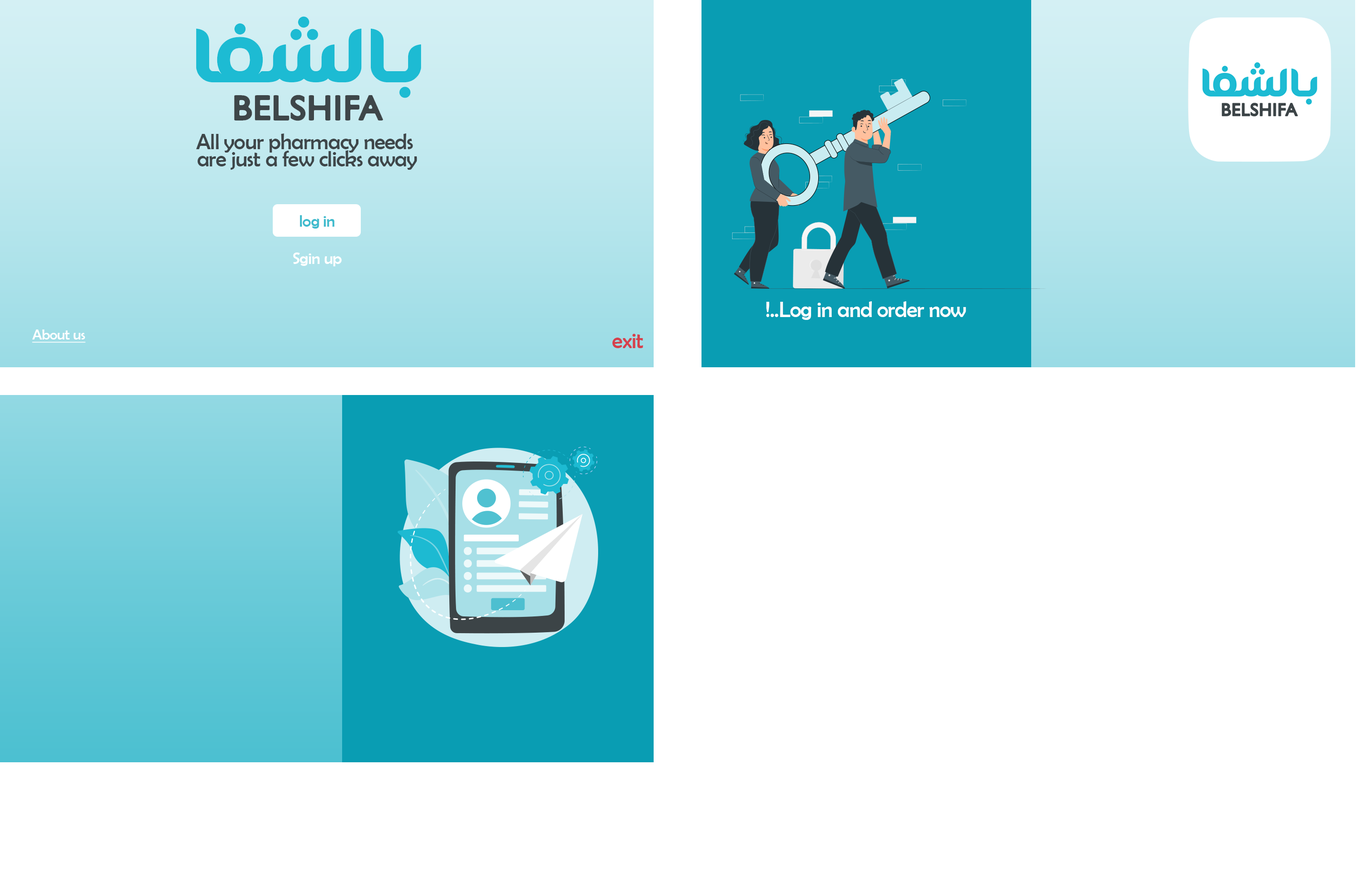
<style>
.page{position:relative;width:1358px;height:878px;background:#ffffff}
.page>*{position:absolute;margin:0}
.t1{font:21.8px/17.2px "BerlinSansFB-Reg";letter-spacing:-0.02em;color:#3e4649}
.t2{font:16.6px "BerlinSansFB-Reg";letter-spacing:-0.02em;color:#3fbbcd}
.t3{font:16.6px "BerlinSansFB-Reg";letter-spacing:-0.02em;color:#ffffff}
.t4{font:21.8px "BerlinSansFB-Reg";letter-spacing:-0.02em;color:#ffffff}
.t5{font:14.7px "BerlinSansFB-Reg";letter-spacing:-0.02em;color:#ffffff;text-decoration:underline}
.t6{font:21.8px "BerlinSansFB-Reg";letter-spacing:-0.02em;color:#d5414c}
</style>
<div class="page">
<p class="t1" style="left:196px;top:133px;width:221px;height:37px;text-align:center">All your pharmacy needs<br>are just a few clicks away</p>
<p class="t2" style="left:299px;top:215px;width:35px;height:14px">log in</p>
<p class="t3" style="left:293px;top:253px;width:49px;height:13px">Sgin up</p>
<p class="t4" style="left:766px;top:301px;width:200px;height:19px">Log in and order now..!</p>
<p class="t5" style="left:32px;top:330px;width:54px;height:13px">About us</p>
<p class="t6" style="left:612px;top:334px;width:31px;height:14px">exit</p>
</div>
